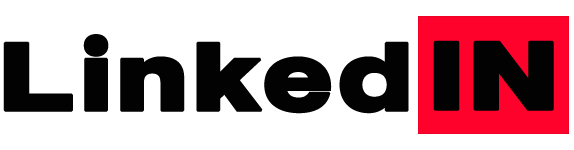
<style>
.page{position:relative;width:574px;height:150px;background:#ffffff}
.page>*{position:absolute;margin:0}
.t1{font:96px "MADEOuterSans-Bold";letter-spacing:0.05em;color:#020202;font-weight:bold}
</style>
<div class="page">
<p class="t1" style="left:3px;top:34px;width:406px;height:80px">Linked</p>
</div>
